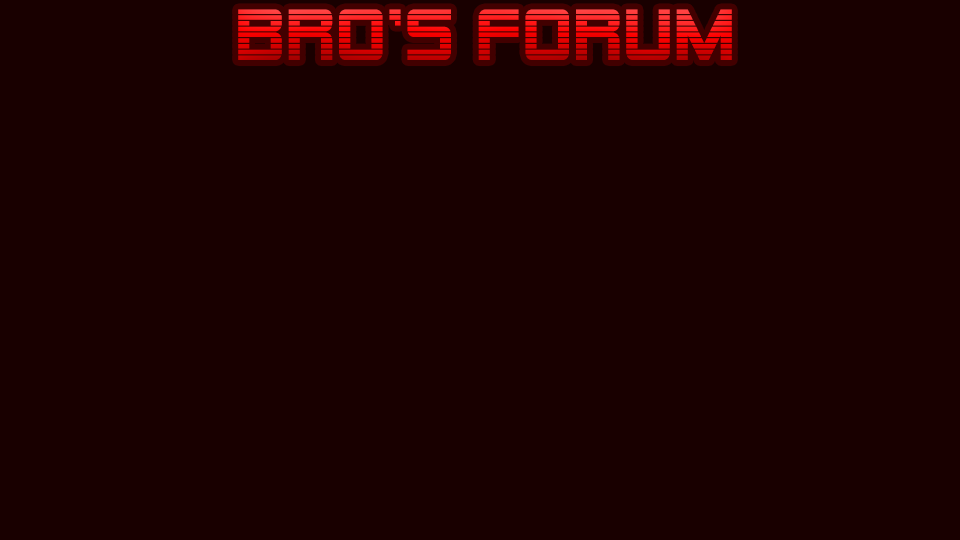
<style>
.page{position:relative;width:960px;height:540px;background:#190000}
.page>*{position:absolute;margin:0}
.t1{font:72px "AlienEncounters";letter-spacing:0.04em}
</style>
<div class="page">
<p class="t1" style="left:238px;top:9px;width:494px;height:51px">Bro’s forum</p>
</div>
